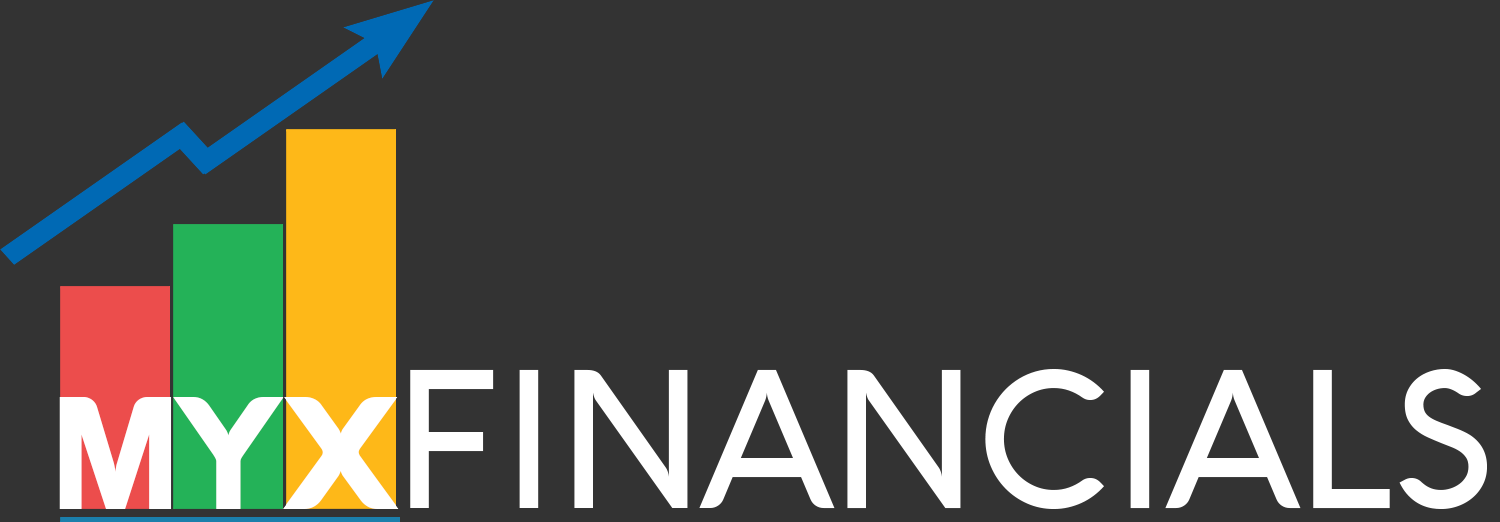
<style>
.page{position:relative;width:1500px;height:522px;background:#333333}
.page>*{position:absolute;margin:0}
.t1{font:191.8px "Aquawax-Medium";color:#ffffff}
</style>
<div class="page">
<p class="t1" style="left:410px;top:368px;width:1077px;height:141px">FINANCIALS</p>
</div>
